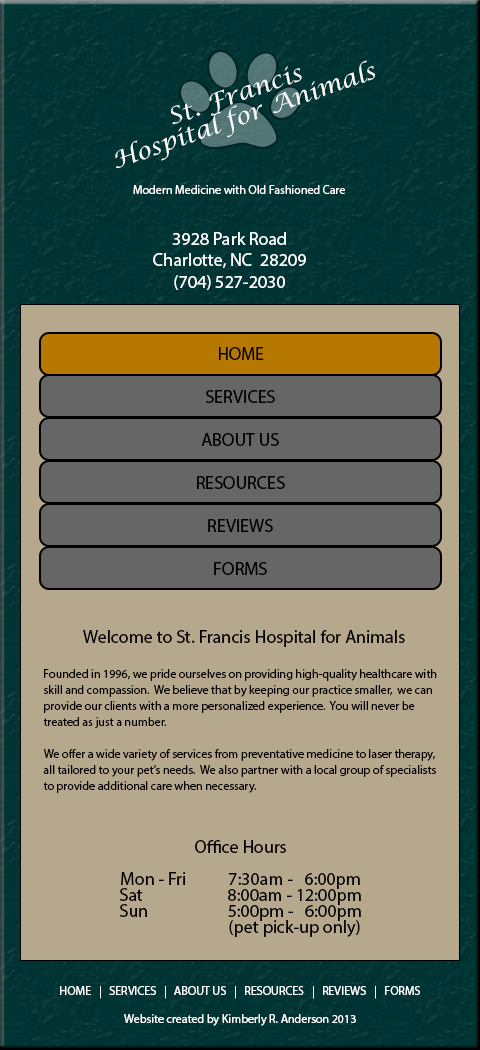
<style>
.page{position:relative;width:480px;height:1050px;background:#b6a88d}
.page>*{position:absolute;margin:0}
.t1{font:22.9px/22.9px "LucidaCalligraphy-Italic";color:#ffffff;scale:1.07 1}
.t2{font:12px "MyriadPro-Regular";color:#ffffff}
.t3{font:18px "MyriadPro-Regular";color:#ffffff}
.t4{font:18px "MyriadPro-Regular";color:#000000}
.t5{font:12px/16px "MyriadPro-Regular";color:#000000}
.t6{font:18px/16px "MyriadPro-Regular";color:#000000}
</style>
<div class="page">
<p class="t1" style="left:115px;top:60px;width:260px;height:108px;text-align:center;rotate:-19deg">St. Francis<br>Hospital for Animals</p>
<p class="t2" style="left:133px;top:185px;width:212px;height:9px">Modern Medicine with Old Fashioned Care</p>
<p class="t3" style="left:153px;top:232px;width:153px;height:58px;text-align:center">3928 Park Road<br>Charlotte, NC  28209<br>(704) 527-2030</p>
<p class="t4" style="left:219px;top:347px;width:45px;height:13px">HOME</p>
<p class="t4" style="left:206px;top:390px;width:69px;height:13px">SERVICES</p>
<p class="t4" style="left:201px;top:433px;width:78px;height:13px">ABOUT US</p>
<p class="t4" style="left:197px;top:476px;width:88px;height:13px">RESOURCES</p>
<p class="t4" style="left:208px;top:519px;width:65px;height:13px">REVIEWS</p>
<p class="t4" style="left:214px;top:562px;width:53px;height:13px">FORMS</p>
<p class="t4" style="left:83px;top:630px;width:322px;height:17px">Welcome to St. Francis Hospital for Animals</p>
<p class="t5" style="left:43px;top:669px;width:394px;height:124px">Founded in 1996, we pride ourselves on providing high-quality healthcare with <br>skill and compassion.  We believe that by keeping our practice smaller,  we can <br>provide our clients with a more personalized experience.  You will never be <br>treated as just a number.<br><br>We offer a wide variety of services from preventative medicine to laser therapy, <br>all tailored to your pet’s needs.  We also partner with a local group of specialists <br>to provide additional care when necessary.</p>
<p class="t6" style="left:120px;top:840px;width:241px;height:97px;text-align:center">Office Hours<br><br>Mon - Fri  7:30am -   6:00pm<br>Sat   8:00am - 12:00pm<br>Sun   5:00pm -   6:00pm<br>   (pet pick-up only)</p>
<p class="t2" style="left:60px;top:986px;width:360px;height:13px">HOME   |   SERVICES   |   ABOUT US   |   RESOURCES   |   REVIEWS   |   FORMS</p>
<p class="t2" style="left:124px;top:1014px;width:232px;height:12px">Website created by Kimberly R. Anderson 2013</p>
</div>
